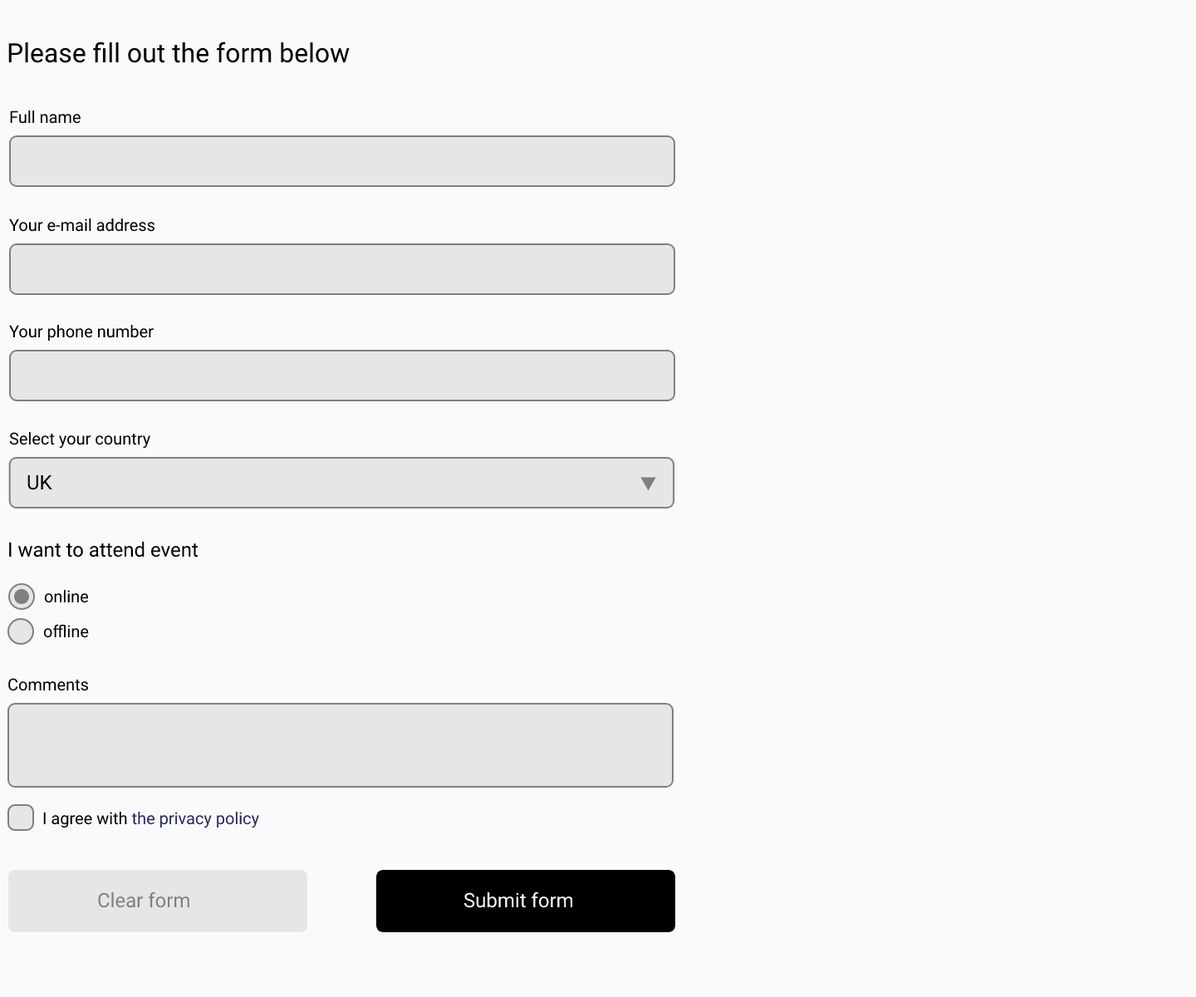
<style>
.page{position:relative;width:1196px;height:997px;background:#fafafa}
.page>*{position:absolute;margin:0}
.t1{font:26.6px "Roboto-Regular";color:#000000}
.t2{font:16.6px "Roboto-Regular";color:#000000}
.t3{font:19.9px "Roboto-Regular";color:#000000}
.t4{font:16.6px "Roboto-Regular";color:#25256e}
.t5{font:19.9px "Roboto-Regular";color:#808080}
.t6{font:19.9px "Roboto-Regular";color:#ffffff}
</style>
<div class="page">
<p class="t1" style="left:8px;top:42px;width:342px;height:21px">Please fill out the form below</p>
<p class="t2" style="left:10px;top:110px;width:71px;height:14px">Full name</p>
<p class="t2" style="left:9px;top:218px;width:146px;height:14px">Your e-mail address</p>
<p class="t2" style="left:9px;top:325px;width:145px;height:16px">Your phone number</p>
<p class="t2" style="left:9px;top:432px;width:141px;height:17px">Select your country</p>
<p class="t3" style="left:27px;top:474px;width:25px;height:16px">UK</p>
<p class="t3" style="left:9px;top:542px;width:189px;height:15px">I want to attend event</p>
<p class="t2" style="left:44px;top:590px;width:45px;height:13px">online</p>
<p class="t2" style="left:43px;top:624px;width:46px;height:14px">offline</p>
<p class="t2" style="left:8px;top:678px;width:80px;height:13px">Сomments</p>
<p class="t4" style="left:43px;top:812px;width:216px;height:16px"><span class="t2">I agree with </span>the privacy policy</p>
<p class="t5" style="left:98px;top:891px;width:91px;height:17px">Clear form</p>
<p class="t6" style="left:464px;top:891px;width:109px;height:17px">Submit form</p>
</div>
